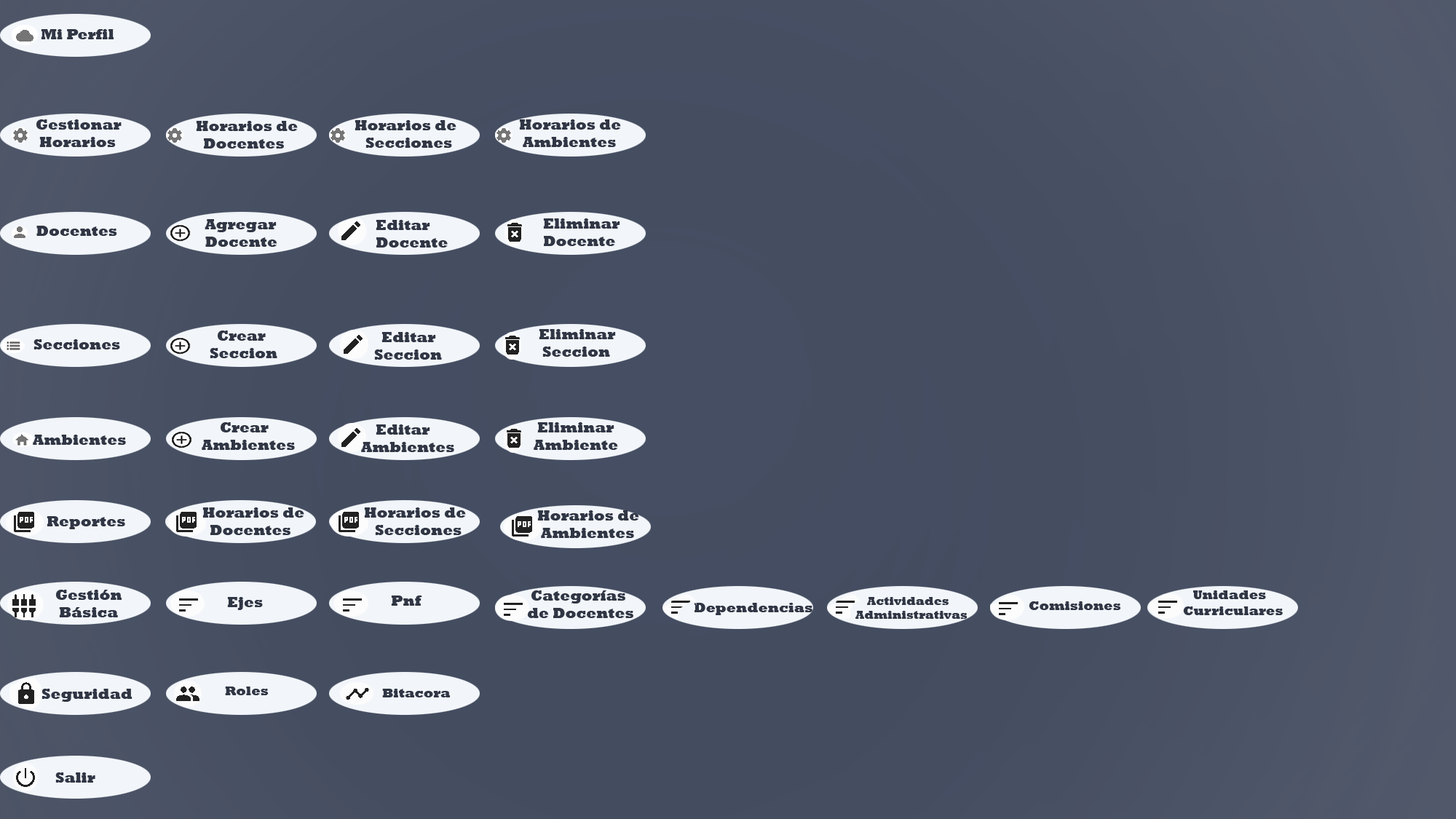
<style>
.page{position:relative;width:1456px;height:819px}
.page>*{position:absolute;margin:0}
.t1{font:14.6px "Rockwell-ExtraBold";color:#303644}
.t2{font:13.1px "Rockwell-ExtraBold";color:#303644}
.t3{font:13.8px "Rockwell-ExtraBold";color:#303644}
.t4{font:11.6px "Rockwell-ExtraBold";color:#303644}
</style>
<div class="page">
<p class="t1" style="left:41px;top:29px;width:73px;height:10px">Mi Perfil</p>
<p class="t1" style="left:36px;top:119px;width:86px;height:28px">Gestionar <br> Horarios</p>
<p class="t1" style="left:196px;top:121px;width:102px;height:28px">Horarios de <br>  Docentes</p>
<p class="t1" style="left:355px;top:120px;width:101px;height:28px">Horarios de<br>   Secciones</p>
<p class="t1" style="left:519px;top:119px;width:102px;height:28px">Horarios de<br> Ambientes</p>
<p class="t1" style="left:205px;top:219px;width:72px;height:28px">Agregar<br> Docente</p>
<p class="t1" style="left:376px;top:220px;width:72px;height:28px">Editar<br>Docente</p>
<p class="t1" style="left:543px;top:218px;width:77px;height:28px">Eliminar <br>Docente</p>
<p class="t1" style="left:36px;top:226px;width:81px;height:10px">Docentes</p>
<p class="t1" style="left:539px;top:329px;width:77px;height:28px">Eliminar<br> Seccion</p>
<p class="t1" style="left:33px;top:339px;width:87px;height:10px">Secciones</p>
<p class="t1" style="left:210px;top:331px;width:67px;height:27px">Crear <br>Seccion</p>
<p class="t1" style="left:374px;top:332px;width:68px;height:28px">Editar<br>Seccion</p>
<p class="t1" style="left:202px;top:422px;width:93px;height:28px">Crear<br>Ambientes</p>
<p class="t1" style="left:361px;top:424px;width:93px;height:28px">Editar<br>Ambientes</p>
<p class="t1" style="left:534px;top:422px;width:84px;height:28px">Eliminar<br>Ambiente</p>
<p class="t1" style="left:33px;top:435px;width:93px;height:10px">Ambientes</p>
<p class="t1" style="left:202px;top:507px;width:102px;height:28px">Horarios de <br>  Docentes</p>
<p class="t1" style="left:364px;top:507px;width:102px;height:28px">Horarios de<br>   Secciones</p>
<p class="t1" style="left:47px;top:516px;width:78px;height:13px">Reportes</p>
<p class="t1" style="left:537px;top:510px;width:102px;height:28px">Horarios de<br> Ambientes</p>
<p class="t1" style="left:56px;top:590px;width:66px;height:27px">Gestión<br> Básica</p>
<p class="t1" style="left:527px;top:590px;width:106px;height:28px">Categorías<br> de Docentes</p>
<p class="t2" style="left:1183px;top:590px;width:100px;height:25px">Unidades<br>Curriculares</p>
<p class="t1" style="left:227px;top:597px;width:36px;height:13px">Ejes</p>
<p class="t1" style="left:391px;top:595px;width:31px;height:11px">Pnf</p>
<p class="t3" style="left:695px;top:603px;width:117px;height:12px">Dependencias</p>
<p class="t4" style="left:855px;top:597px;width:112px;height:22px">Actividades<br>Administrativas</p>
<p class="t2" style="left:1029px;top:601px;width:91px;height:9px">Comisiones</p>
<p class="t1" style="left:41px;top:689px;width:91px;height:13px">Seguridad</p>
<p class="t2" style="left:225px;top:686px;width:43px;height:9px">Roles</p>
<p class="t2" style="left:382px;top:689px;width:68px;height:8px">Bitacora</p>
<p class="t1" style="left:55px;top:772px;width:40px;height:11px">Salir</p>
</div>
